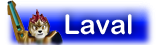
<style>
.page{position:relative;width:156px;height:45px}
.page>*{position:absolute;margin:0}
.t1{font:26.9px "ArialRoundedMTBold";color:#ffffff}
</style>
<div class="page">
<p class="t1" style="left:65px;top:14px;width:67px;height:21px">Laval</p>
</div>
